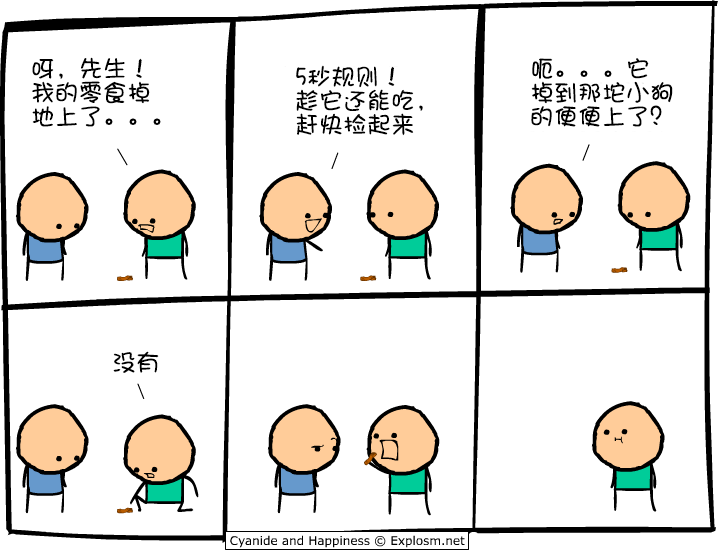
<style>
.page{position:relative;width:720px;height:550px;background:#ffffff}
.page>*{position:absolute;margin:0}
.t1{font:24px/24px "DFShaoNvW5";color:#000000}
.t2{font:24px "DFShaoNvW5";color:#000000}
</style>
<div class="page">
<p class="t1" style="left:32px;top:57px;width:129px;height:70px">呀，先生！<br>我的零食掉<br>地上了。。。</p>
<p class="t1" style="left:296px;top:65px;width:127px;height:71px">5秒规则！<br>趁它还能吃，<br>赶快捡起来</p>
<p class="t1" style="left:531px;top:58px;width:142px;height:69px">呃。。。它<br>掉到那坨小狗<br>的便便上了？</p>
<p class="t2" style="left:113px;top:351px;width:46px;height:22px">没有</p>
</div>
